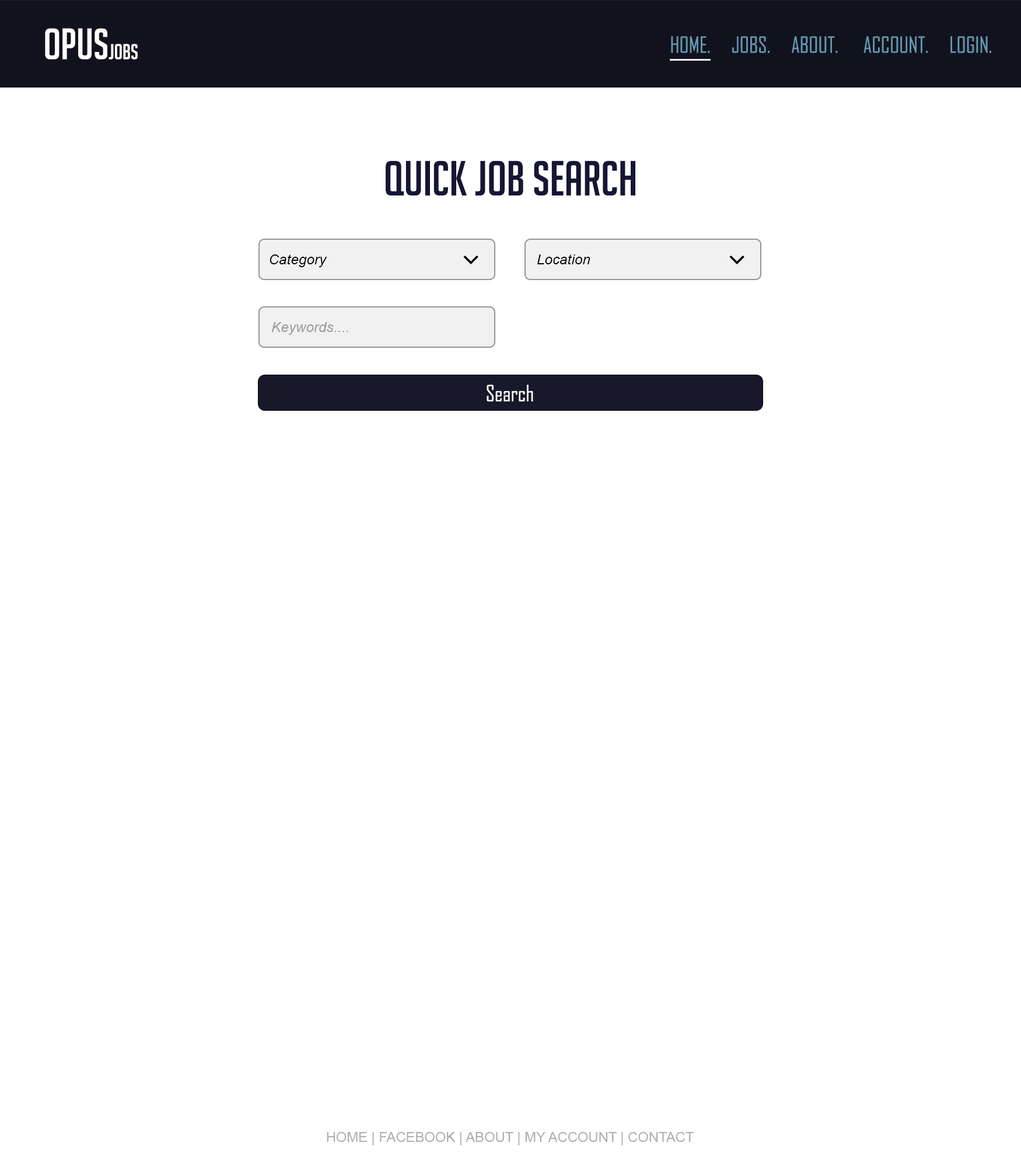
<style>
.page{position:relative;width:1021px;height:1167px;background:#ffffff}
.page>*{position:absolute;margin:0}
.t1{font:42.6px "BigNoodleTitling";color:#fefefe}
.t2{font:21px "BigNoodleTitling";color:#fefefe}
.t3{font:21.2px "AgencyFB-Reg";color:#6498ae}
.t4{font:48px "BigNoodleTitling";color:#151535}
.t5{font:14.2px "Arial-ItalicMT";color:#000000}
.t6{font:14.2px "Arial-ItalicMT";color:#999999}
.t7{font:21.6px "AgencyFB-Reg";color:#fefefe}
.t8{font:13.9px "ArialMT";color:#aeaeae}
</style>
<div class="page">
<p class="t1" style="left:45px;top:28px;width:93px;height:32px">OPUS<span class="t2">Jobs</span></p>
<p class="t3" style="left:671px;top:36px;width:321px;height:17px">HOME.     JOBS.     ABOUT.      ACCOUNT.     LOGIN.</p>
<p class="t4" style="left:386px;top:161px;width:250px;height:35px">QUICK JOB SEARCH</p>
<p class="t5" style="left:270px;top:254px;width:57px;height:13px">Category</p>
<p class="t5" style="left:538px;top:254px;width:53px;height:10px">Location</p>
<p class="t6" style="left:271px;top:322px;width:77px;height:13px">Keywords....</p>
<p class="t7" style="left:487px;top:385px;width:46px;height:17px">Search</p>
<p class="t8" style="left:327px;top:1132px;width:368px;height:14px">HOME | FACEBOOK | ABOUT | MY ACCOUNT | CONTACT</p>
</div>
